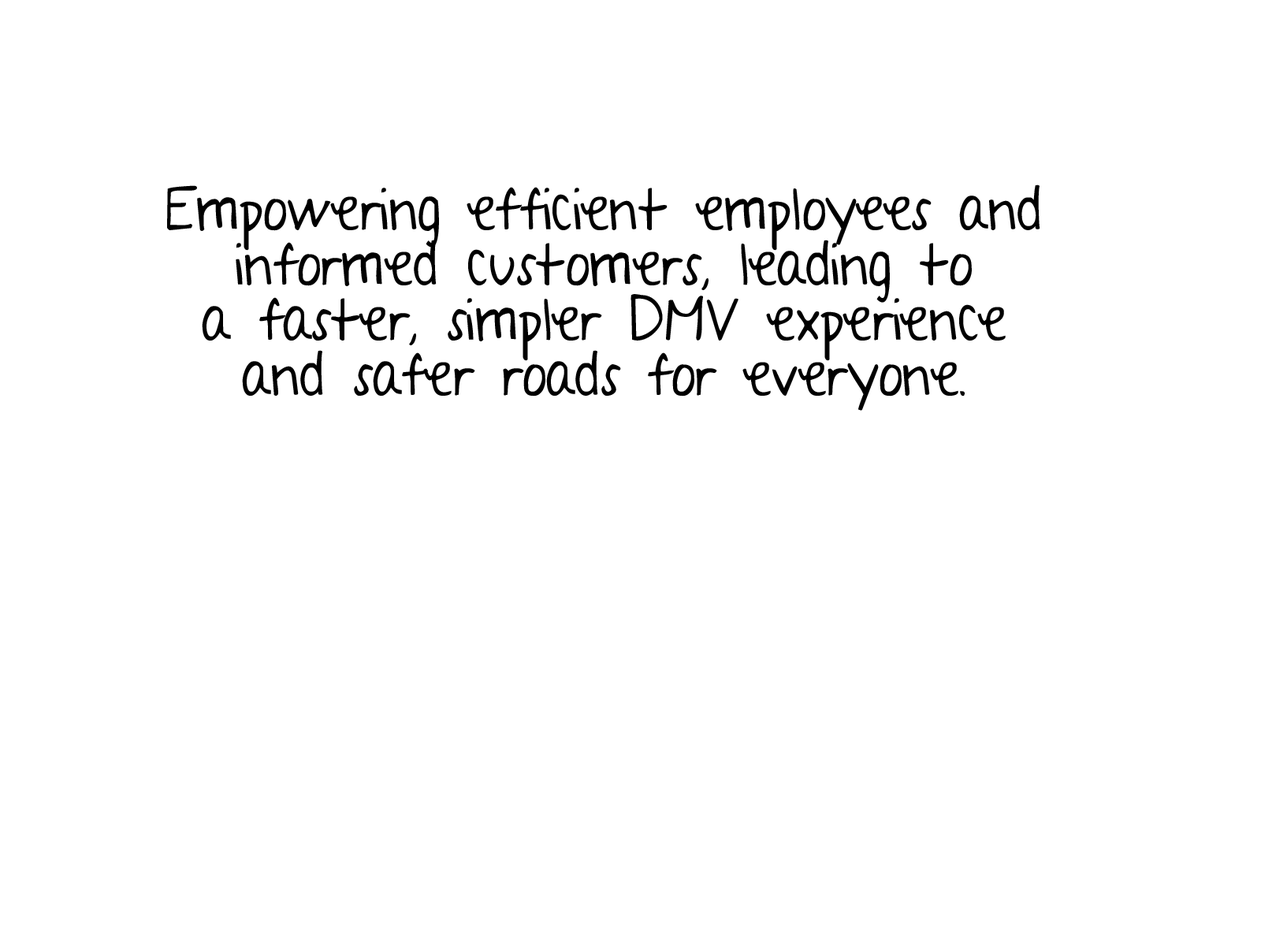
<style>
.page{position:relative;width:1261px;height:946px;background:#ffffff}
.page>*{position:absolute;margin:0}
.t1{font:56.7px/55.2px "AYearWithoutRain";color:#000000}
</style>
<div class="page">
<p class="t1" style="left:167px;top:184px;width:873px;height:227px;text-align:center">Empowering efficient employees and<br>informed customers, leading to<br>a faster, simpler DMV experience<br>and safer roads for everyone.</p>
</div>
